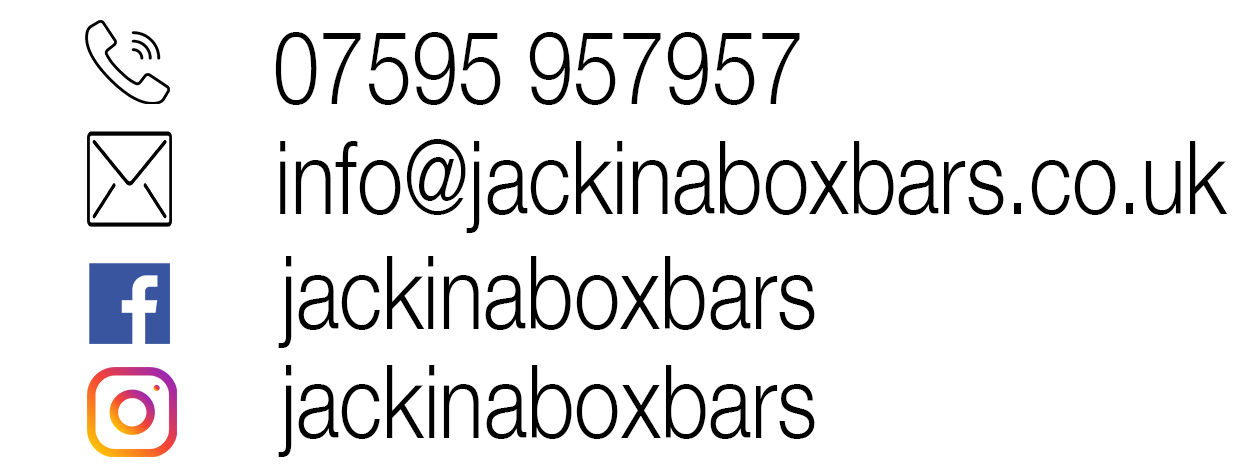
<style>
.page{position:relative;width:1254px;height:470px;background:#ffffff}
.page>*{position:absolute;margin:0}
.t1{font:102.3px "HelveticaNeue-Light";color:#000000;scale:0.81 1}
</style>
<div class="page">
<p class="t1" style="left:275px;top:32px;width:525px;height:73px">07595 957957</p>
<p class="t1" style="left:280px;top:139px;width:948px;height:94px">info@jackinaboxbars.co.uk</p>
<p class="t1" style="left:278px;top:256px;width:537px;height:92px">jackinaboxbars</p>
<p class="t1" style="left:278px;top:365px;width:537px;height:92px">jackinaboxbars</p>
</div>
